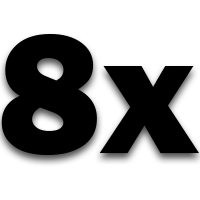
<style>
.page{position:relative;width:200px;height:200px;background:#ffffff}
.page>*{position:absolute;margin:0}
.t1{font:175px "FranklinGothic-Heavy";color:#000000}
</style>
<div class="page">
<p class="t1" style="left:1px;top:34px;width:198px;height:121px">8x</p>
</div>
